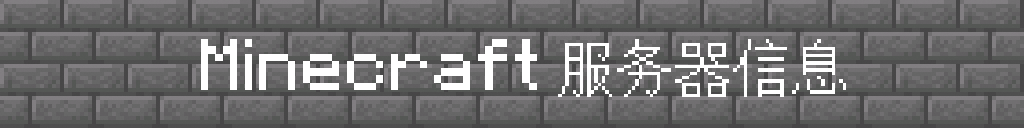
<style>
.page{position:relative;width:1024px;height:128px}
.page>*{position:absolute;margin:0}
.t1{font:58.3px "MinecraftAE-Pixel";color:#ffffff}
</style>
<div class="page">
<p class="t1" style="left:201px;top:39px;width:645px;height:58px">Minecraft 服务器信息</p>
</div>
